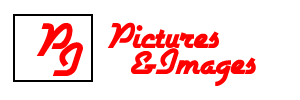
<style>
.page{position:relative;width:300px;height:100px;background:#ffffff}
.page>*{position:absolute;margin:0}
.t1{font:55px "Airstream";color:#ff0000}
.t2{font:42px "Airstream";color:#ff0000}
</style>
<div class="page">
<p class="t1" style="left:36px;top:23px;width:37px;height:33px">P</p>
<p class="t2" style="left:107px;top:22px;width:112px;height:26px">Pictures</p>
<p class="t1" style="left:53px;top:42px;width:30px;height:34px">I</p>
<p class="t2" style="left:131px;top:48px;width:125px;height:38px">&amp;Images</p>
</div>
